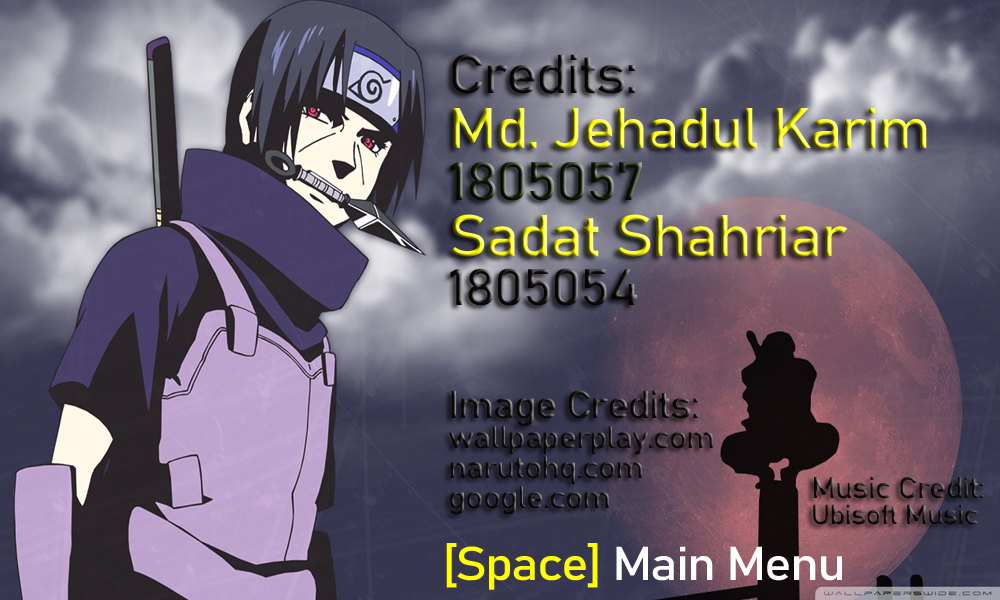
<style>
.page{position:relative;width:1000px;height:600px}
.page>*{position:absolute;margin:0}
.t1{font:30.8px "Bahnschrift";letter-spacing:-0.04em;scale:1.11 1}
.t2{font:54.1px "Bahnschrift";letter-spacing:-0.04em;scale:1.11 1}
.t3{font:56.6px "Bahnschrift";letter-spacing:-0.04em;scale:1.11 1}
.t4{font:52.9px "Bahnschrift";letter-spacing:-0.04em;scale:1.11 1}
.t5{font:57.8px "Bahnschrift";letter-spacing:-0.04em;scale:1.11 1}
.t6{font:50.4px "Bahnschrift";letter-spacing:-0.04em;scale:1.11 1}
.t7{font:38.1px "Bahnschrift";letter-spacing:-0.04em;scale:1.11 1}
.t8{font:29.5px "Bahnschrift";letter-spacing:-0.04em;color:#110b0b;scale:1.11 1}
.t9{font:27.1px "Bahnschrift";letter-spacing:-0.04em;color:#110b0b;scale:1.11 1}
.t10{font:46.8px "Bahnschrift";letter-spacing:-0.04em;color:#ffffff;scale:1.11 1}
.t11{font:46.8px "Bahnschrift";letter-spacing:-0.04em;color:#ffff00;scale:1.11 1}
</style>
<div class="page">
<p class="t1" style="left:449px;top:54px;width:478px;height:461px"><span class="t2">Credits:<br></span><span class="t3">Md. Jehadul Karim<br></span><span class="t4">1805057<br></span><span class="t5">Sadat Shahriar<br></span><span class="t6">1805054<br><br></span><span class="t7">Image Credits:<br></span>wallpaperplay.com<br>narutohq.com<br>google.com</p>
<p class="t8" style="left:813px;top:476px;width:171px;height:49px">Music Credit:<br><span class="t9">Ubisoft Music</span></p>
<p class="t10" style="left:446px;top:543px;width:396px;height:47px"><span class="t11">[Space]</span> Main Menu</p>
</div>
